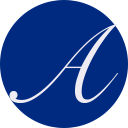
<style>
.page{position:relative;width:128px;height:128px;background:#002a7f}
.page>*{position:absolute;margin:0}
.t1{font:110px "SnellRoundhand";color:#f0ebf3}
</style>
<div class="page">
<p class="t1" style="left:9px;top:24px;width:110px;height:79px">A</p>
</div>
